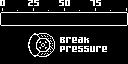
<style>
.page{position:relative;width:128px;height:64px;background:#000000}
.page>*{position:absolute;margin:0}
.t1{font:16px "Gamer";color:#ffffff}
.t2{font:16px/9.5px "Gamer";color:#ffffff}
</style>
<div class="page">
<p class="t1" style="left:0px;top:0px;width:5px;height:6px">0</p>
<p class="t1" style="left:28px;top:0px;width:11px;height:6px">25</p>
<p class="t1" style="left:59px;top:0px;width:11px;height:6px">50</p>
<p class="t1" style="left:90px;top:0px;width:11px;height:6px">75</p>
<p class="t2" style="left:60px;top:37px;width:47px;height:15px">Break<br>Pressure</p>
</div>
